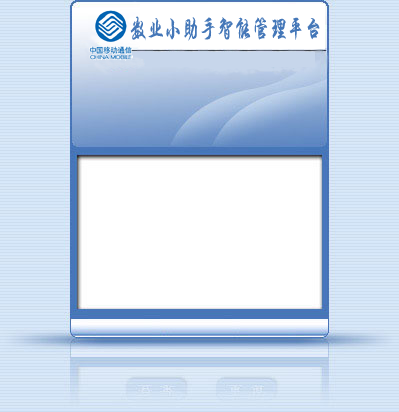
<style>
.page{position:relative;width:399px;height:412px;background:#ffffff}
.page>*{position:absolute;margin:0}
.t1{font:25.2px "HYi4gj";letter-spacing:-0.025em;color:#4477b8;scale:0.71 1}
</style>
<div class="page">
<p class="t1" style="left:130px;top:16px;width:190px;height:25px">数业小助手智能管理平台</p>
</div>
